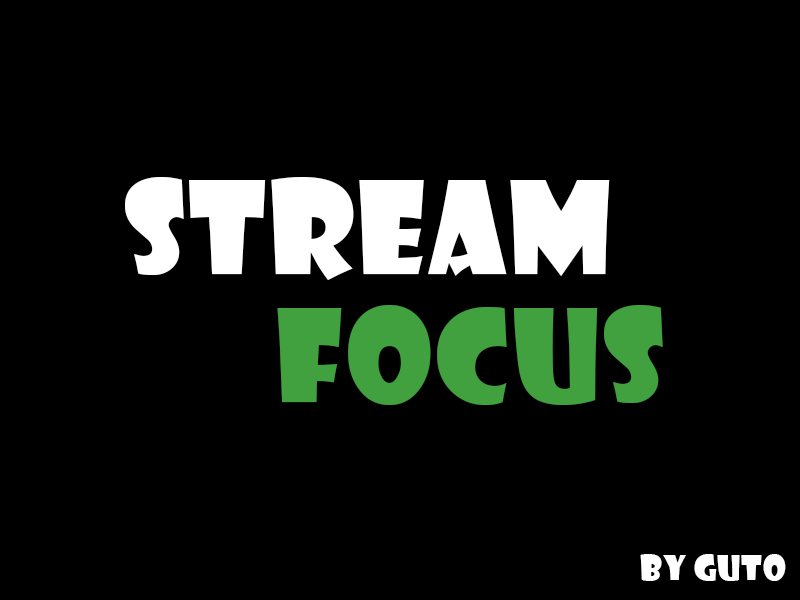
<style>
.page{position:relative;width:800px;height:600px;background:#000000}
.page>*{position:absolute;margin:0}
.t1{font:125px "ShowcardGothic-Reg";letter-spacing:0.02em;color:#ffffff}
.t2{font:125px "ShowcardGothic-Reg";letter-spacing:0.02em;color:#41a13f}
.t3{font:33.3px "ShowcardGothic-Reg";letter-spacing:0.02em;color:#ffffff}
</style>
<div class="page">
<p class="t1" style="left:125px;top:177px;width:485px;height:103px">STREAM</p>
<p class="t2" style="left:277px;top:305px;width:386px;height:100px">FOCUS</p>
<p class="t3" style="left:640px;top:554px;width:146px;height:27px">By Guto</p>
</div>
